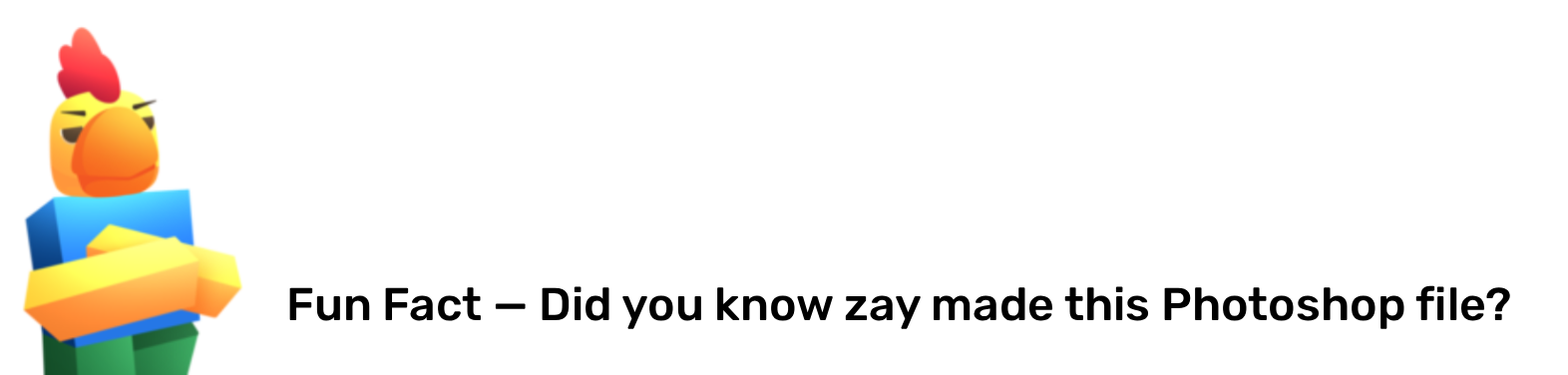
<style>
.page{position:relative;width:1568px;height:375px;background:#ffffff}
.page>*{position:absolute;margin:0}
.t1{font:46.1px "Rubik-Medium";color:#000000}
</style>
<div class="page">
<p class="t1" style="left:289px;top:285px;width:1221px;height:44px">Fun Fact — Did you know zay made this Photoshop file?</p>
</div>
